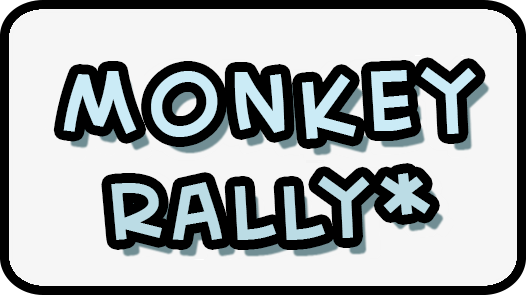
<style>
.page{position:relative;width:526px;height:295px;background:#f6f6f6}
.page>*{position:absolute;margin:0}
.t1{font:100px/104px "CreativeBlockBB";letter-spacing:0.125em;color:#bddbe5}
.t2{font:93px/104px "CreativeBlockBB";letter-spacing:0.085em;color:#bddbe5}
</style>
<div class="page">
<p class="t1" style="left:63px;top:67px;width:413px;height:173px;text-align:center">Monkey   <span class="t2">Rally*</span></p>
</div>
